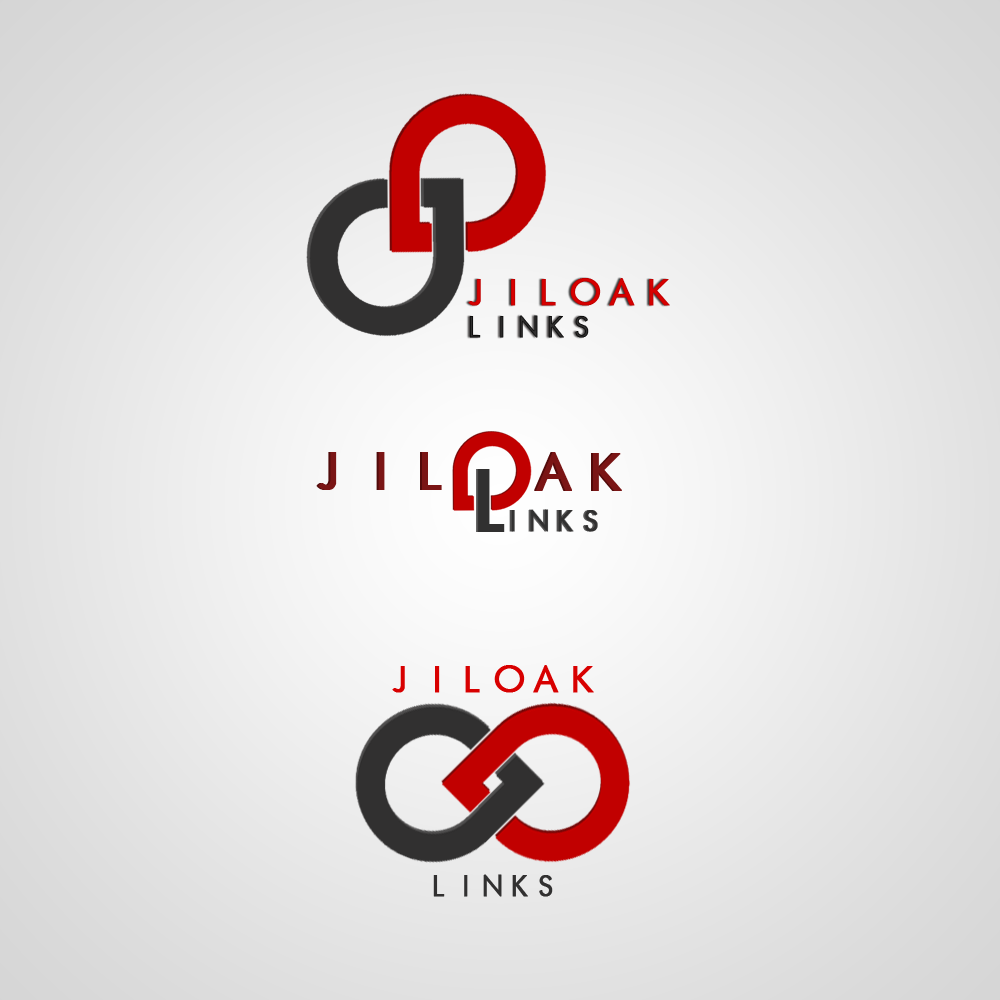
<style>
.page{position:relative;width:1000px;height:1000px}
.page>*{position:absolute;margin:0}
.t1{font:35.8px "FuturistFixedWidth-Regular";color:#d20000;font-weight:bold}
.t2{font:29.1px "FuturistFixedWidth-Regular";color:#1f1e1e;font-weight:bold;scale:0.89 1}
.t3{font:35.8px "FuturistFixedWidth-Regular";color:#d80000;font-weight:bold}
.t4{font:29.1px "FuturistFixedWidth-Regular";color:#313030;font-weight:bold;scale:0.89 1}
</style>
<div class="page">
<p class="t1" style="left:468px;top:278px;width:202px;height:28px">JILOAK</p>
<p class="t2" style="left:469px;top:315px;width:120px;height:23px">LINKS</p>
<p class="t3" style="left:392px;top:665px;width:202px;height:28px">JILOAK</p>
<p class="t4" style="left:433px;top:874px;width:120px;height:23px">LINKS</p>
</div>
